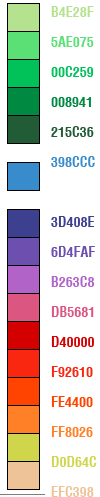
<style>
.page{position:relative;width:100px;height:497px;background:#ffffff}
.page>*{position:absolute;margin:0}
.t1{font:14px/30px "Helvetica-Condensed-Bold";color:#b4e28f;text-transform:uppercase}
.t2{font:14px/30px "Helvetica-Condensed-Bold";color:#5ae075;text-transform:uppercase}
.t3{font:14px/30px "Helvetica-Condensed-Bold";color:#00c259;text-transform:uppercase}
.t4{font:14px/30px "Helvetica-Condensed-Bold";color:#008941;text-transform:uppercase}
.t5{font:14px/30px "Helvetica-Condensed-Bold";color:#215c36;text-transform:uppercase}
.t6{font:14px/30px "Helvetica-Condensed-Bold";color:#398ccc;text-transform:uppercase}
.t7{font:14px/30px "Helvetica-Condensed-Bold";color:#3d408e;text-transform:uppercase}
.t8{font:14px/30px "Helvetica-Condensed-Bold";color:#6d4faf;text-transform:uppercase}
.t9{font:14px/30px "Helvetica-Condensed-Bold";color:#b263c8;text-transform:uppercase}
.t10{font:14px/30px "Helvetica-Condensed-Bold";color:#db5681;text-transform:uppercase}
.t11{font:14px/30px "Helvetica-Condensed-Bold";color:#d40000;text-transform:uppercase}
.t12{font:14px/30px "Helvetica-Condensed-Bold";color:#f92610;text-transform:uppercase}
.t13{font:14px/30px "Helvetica-Condensed-Bold";color:#fe4400;text-transform:uppercase}
.t14{font:14px/30px "Helvetica-Condensed-Bold";color:#ff8026;text-transform:uppercase}
.t15{font:14px/30px "Helvetica-Condensed-Bold";color:#d0d64c;text-transform:uppercase}
.t16{font:14px/30px "Helvetica-Condensed-Bold";color:#efc398;text-transform:uppercase}
</style>
<div class="page">
<p class="t1" style="left:51px;top:6px;width:46px;height:491px">B4E28F<br><span class="t2">5AE075<br></span><span class="t3">00C259<br></span><span class="t4">008941<br></span><span class="t5">215C36<br></span><span class="t6">398CCC<br><br></span><span class="t7">3D408E<br></span><span class="t8">6D4FAF</span><span class="t9"><br>B263C8</span><span class="t10"><br>DB5681<br></span><span class="t11">D40000<br></span><span class="t12">F92610<br></span><span class="t13">FE4400<br></span><span class="t14">FF8026<br></span><span class="t15">D0D64C<br></span><span class="t16">EFC398</span></p>
</div>
